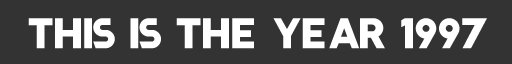
<style>
.page{position:relative;width:512px;height:64px;background:#333333}
.page>*{position:absolute;margin:0}
.t1{font:60px "Basic_LAZER";color:#ffffff}
</style>
<div class="page">
<p class="t1" style="left:28px;top:18px;width:459px;height:31px">THIS IS THE YEAR 1997</p>
</div>
